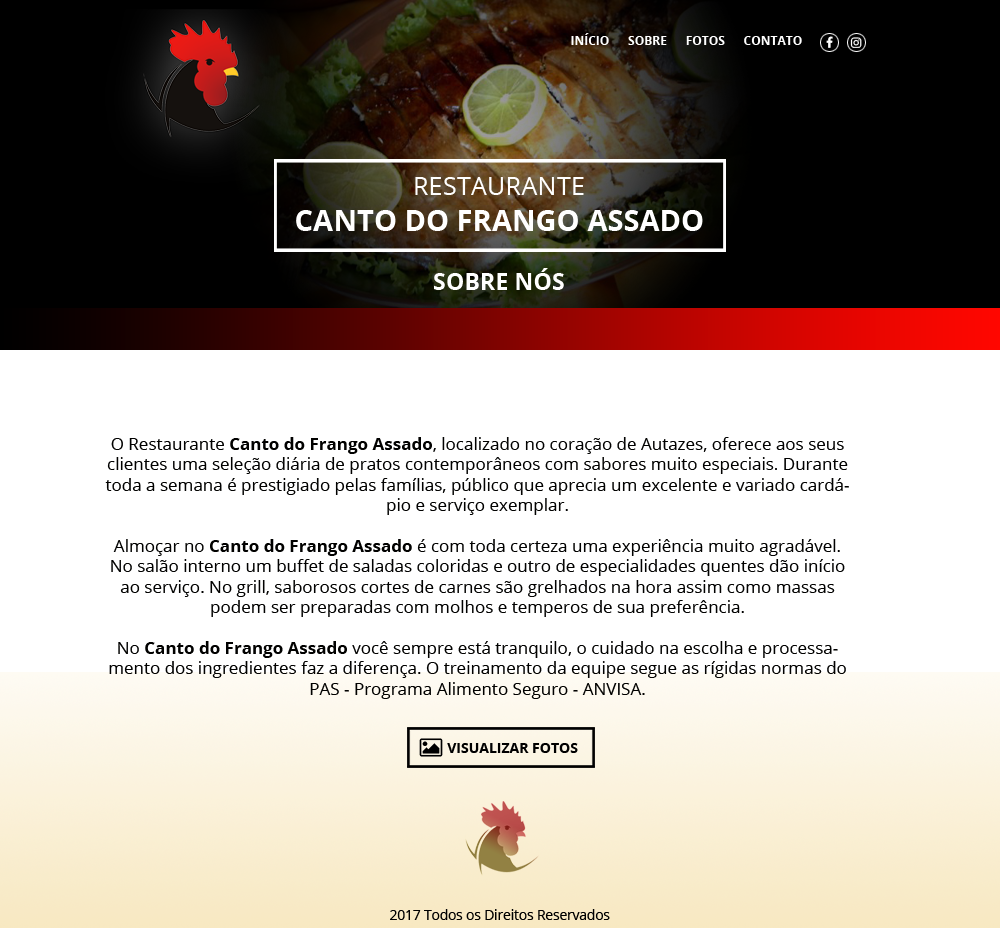
<style>
.page{position:relative;width:1000px;height:928px;background:#ffffff}
.page>*{position:absolute;margin:0}
.t1{font:12px "OpenSans-Bold";color:#ffffff}
.t2{font:25.5px "OpenSans";color:#ffffff}
.t3{font:29.1px "OpenSans-Bold";color:#ffffff}
.t4{font:23.3px "OpenSans-Bold";color:#ffffff}
.t5{font:17px "OpenSans";color:#010100}
.t6{font:17px "OpenSans-Bold";color:#010100}
.t7{font:14px "OpenSans-Bold";color:#000000}
.t8{font:13.5px "OpenSans";color:#000000}
</style>
<div class="page">
<p class="t1" style="left:571px;top:33px;width:231px;height:12px">INÍCIO      SOBRE      FOTOS      CONTATO</p>
<p class="t2" style="left:415px;top:177px;width:169px;height:18px">RESTAURANTE</p>
<p class="t3" style="left:296px;top:210px;width:407px;height:21px">CANTO DO FRANGO ASSADO</p>
<p class="t4" style="left:434px;top:268px;width:130px;height:22px">SOBRE NÓS</p>
<p class="t5" style="left:105px;top:437px;width:744px;height:262px;text-align:center">O Restaurante <span class="t6">Canto do Frango Assado</span>, localizado no coração de Autazes, oferece aos seus clientes uma seleção diária de pratos contemporâneos com sabores muito especiais. Durante toda a semana é prestigiado pelas famílias, público que aprecia um excelente e variado cardápio e serviço exemplar. <br><br>Almoçar no <span class="t6">Canto do Frango Assado</span> é com toda certeza uma experiência muito agradável. No salão interno um buffet de saladas coloridas e outro de especialidades quentes dão início ao serviço. No grill, saborosos cortes de carnes são grelhados na hora assim como massas podem ser preparadas com molhos e temperos de sua preferência.<br><br>No <span class="t6">Canto do Frango Assado</span> você sempre está tranquilo, o cuidado na escolha e processamento dos ingredientes faz a diferença. O treinamento da equipe segue as rígidas normas do PAS - Programa Alimento Seguro - ANVISA.</p>
<p class="t7" style="left:447px;top:743px;width:131px;height:10px">VISUALIZAR FOTOS</p>
<p class="t8" style="left:390px;top:909px;width:220px;height:11px">2017 Todos os Direitos Reservados</p>
</div>
